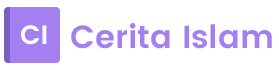
<style>
.page{position:relative;width:279px;height:70px;background:#ffffff}
.page>*{position:absolute;margin:0}
.t1{font:26.4px "Poppins-SemiBold";color:#ffffff}
.t2{font:32.1px "Poppins-SemiBold";color:#a37ff1}
</style>
<div class="page">
<p class="t1" style="left:21px;top:25px;width:26px;height:20px">CI</p>
<p class="t2" style="left:71px;top:23px;width:201px;height:26px">Cerita Islam</p>
</div>
